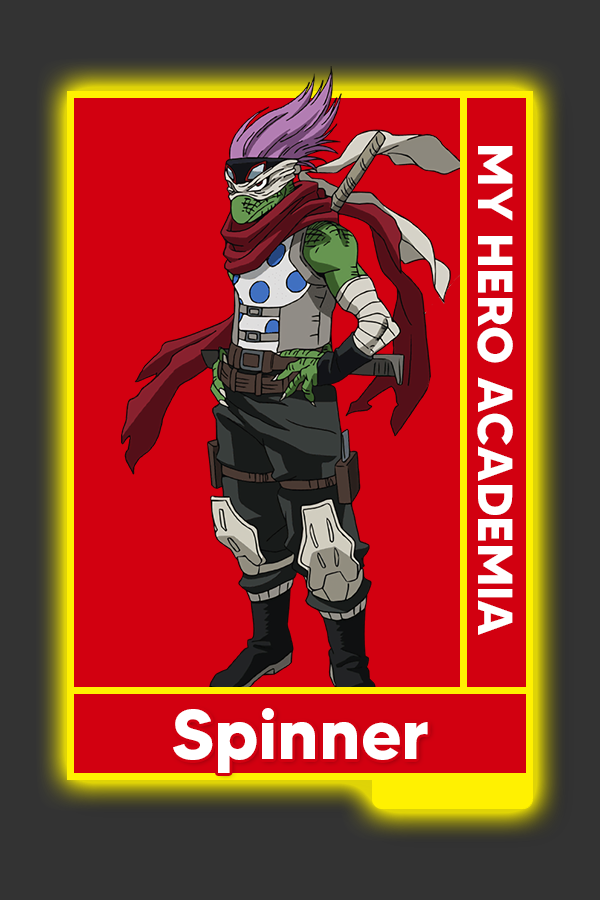
<style>
.page{position:relative;width:600px;height:900px;background:#d20010}
.page>*{position:absolute;margin:0}
.t1{font:48.8px "MADETOMMY-Bold";color:#ffffff}
.t2{font:70.1px "MADETOMMY-Bold";color:#ffffff}
</style>
<div class="page">
<p class="t1" style="left:477px;top:146px;width:36px;height:489px;rotate:90deg">MY HERO ACADEMIA</p>
<p class="t2" style="left:173px;top:708px;width:255px;height:65px">Spinner</p>
</div>
